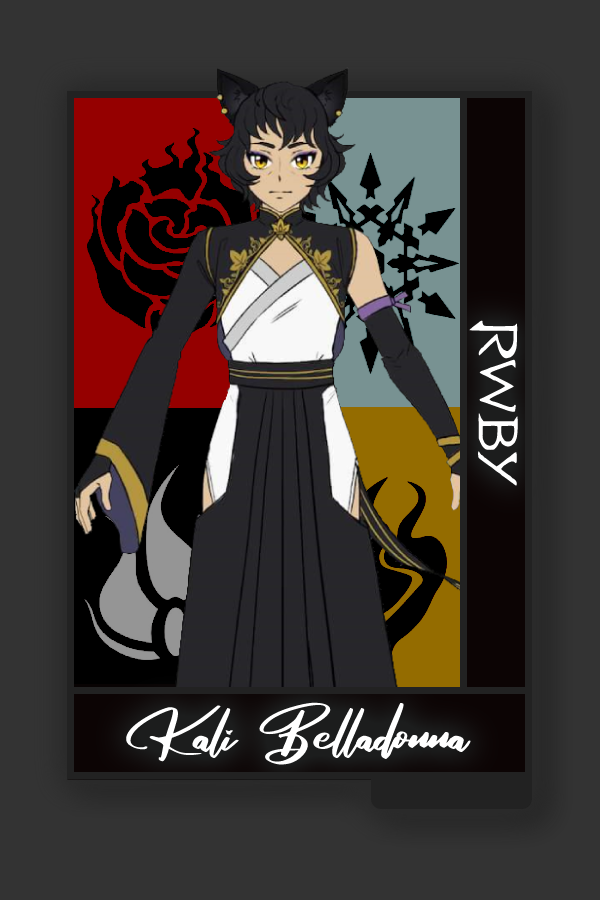
<style>
.page{position:relative;width:600px;height:900px;background:#333333}
.page>*{position:absolute;margin:0}
.t1{font:61.3px "RWBY_Style";color:#ffffff;scale:1.25 1}
.t2{font:75px "RosegaFREE";color:#ffffff}
</style>
<div class="page">
<p class="t1" style="left:469px;top:320px;width:49px;height:166px;rotate:90deg">RWBY</p>
<p class="t2" style="left:123px;top:702px;width:348px;height:63px">Kali Belladonna</p>
</div>
